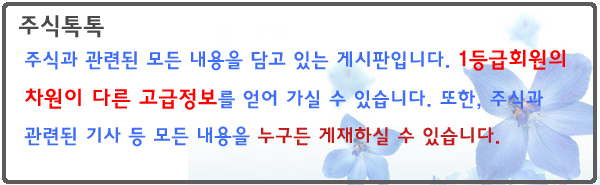
<style>
.page{position:relative;width:600px;height:185px;background:#ffffff}
.page>*{position:absolute;margin:0}
.t1{font:24px "HaanYGodic24";color:#494949}
.t2{font:20px "HaanYGodic24";color:#3e6ef9}
.t3{font:22px "HaanYGodic24";color:#fe0000}
.t4{font:20px "HaanYGodic24";color:#c41c1c}
</style>
<div class="page">
<p class="t1" style="left:19px;top:15px;width:85px;height:23px">주식톡톡</p>
<p class="t2" style="left:24px;top:49px;width:541px;height:98px">주식과 관련된 모든 내용을 담고 있는 게시판입니다. <span class="t3">1등급회원의 차원이 다른 고급정보</span>를 얻어 가실 수 있습니다. 또한, 주식과 관련된 기사 등 모든 내용을 <span class="t4">누구든 게재하실 수 있습니다.</span></p>
</div>
